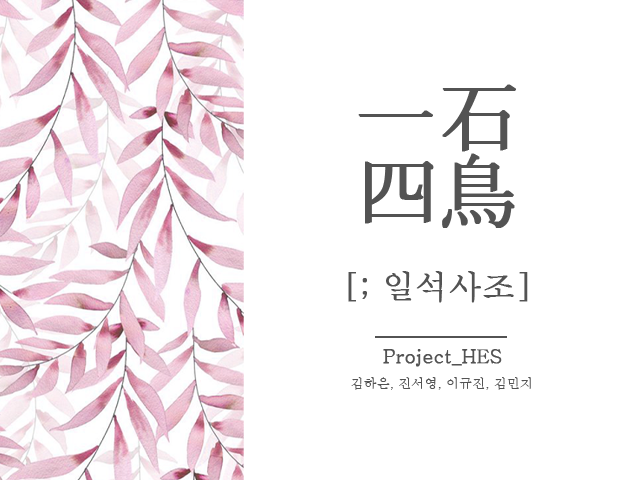
<style>
.page{position:relative;width:640px;height:480px;background:#ffffff}
.page>*{position:absolute;margin:0}
.t1{font:80.1px/75.5px "PyunjiR-HM";color:#535353;font-weight:bold}
.t2{font:32.3px "Batang";color:#535353;font-weight:bold}
.t3{font:18.9px "Batang";color:#535353;font-weight:bold}
.t4{font:13.2px "Batang";color:#535353}
</style>
<div class="page">
<p class="t1" style="left:358px;top:84px;width:158px;height:144px">一石<br>四鳥</p>
<p class="t2" style="left:348px;top:271px;width:180px;height:32px">[; 일석사조]</p>
<p class="t3" style="left:383px;top:349px;width:119px;height:18px">Project_HES</p>
<p class="t4" style="left:351px;top:377px;width:180px;height:13px">김하은, 진서영, 이규진, 김민지</p>
</div>
